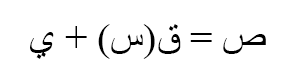
<style>
.page{position:relative;width:286px;height:83px;background:#ffffff}
.page>*{position:absolute;margin:0}
.t1{font:40px "TimesNewRomanPSMT";color:#000000}
</style>
<div class="page">
<p class="t1" style="left:30px;top:24px;width:236px;height:35px">ص = ق(س) + ي</p>
</div>
